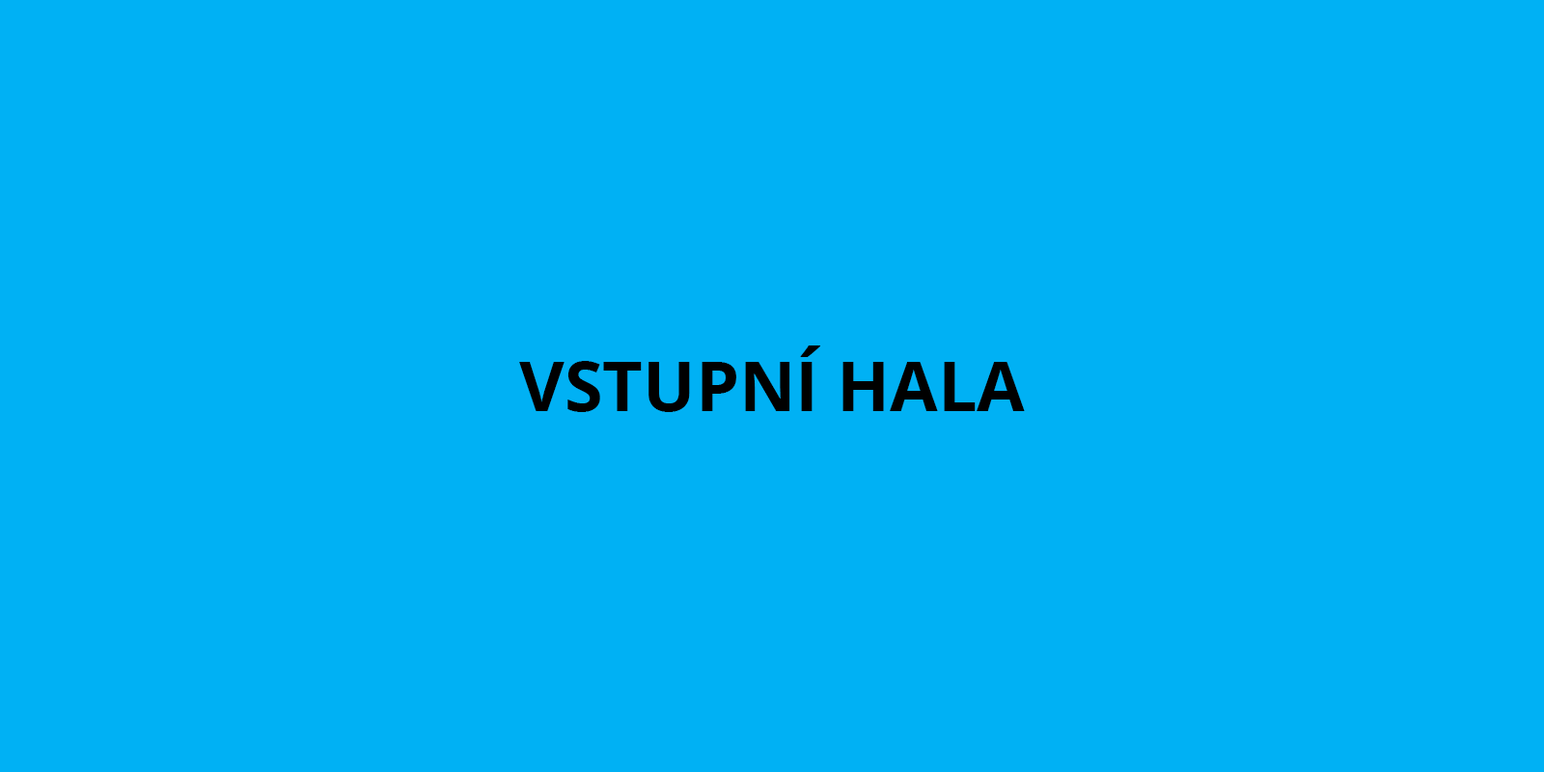
<style>
.page{position:relative;width:1544px;height:772px;background:#00b1f4}
.page>*{position:absolute;margin:0}
.t1{font:69.5px "OpenSans-Bold";color:#000000;text-transform:uppercase}
</style>
<div class="page">
<p class="t1" style="left:519px;top:346px;width:506px;height:66px">vstupní hala</p>
</div>
